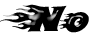
<style>
.page{position:relative;width:100px;height:40px;background:#ffffff}
.page>*{position:absolute;margin:0}
.t1{font:35.6px "Blazed";color:#000000;scale:1.04 1}
</style>
<div class="page">
<p class="t1" style="left:0px;top:4px;width:89px;height:29px">No</p>
</div>
